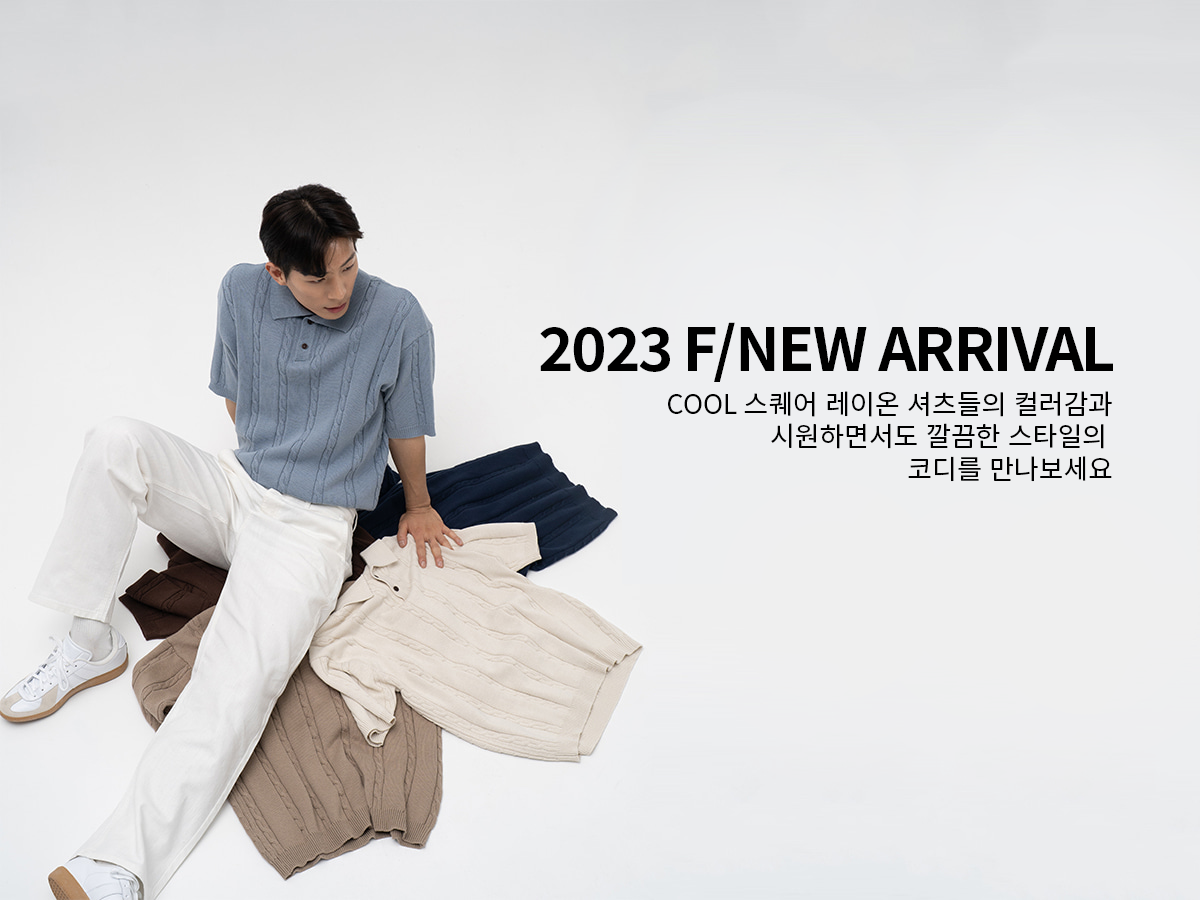
<style>
.page{position:relative;width:1200px;height:900px}
.page>*{position:absolute;margin:0}
.t1{font:60px "NotoSansKR-Bold";letter-spacing:-0.03em;color:#000000}
.t2{font:27px "NotoSansKR-Regular";letter-spacing:-0.002em;color:#000000}
</style>
<div class="page">
<p class="t1" style="left:540px;top:322px;width:573px;height:60px">2023 F/NEW ARRIVAL</p>
<p class="t2" style="left:668px;top:391px;width:444px;height:91px;text-align:right">COOL 스퀘어 레이온 셔츠들의 컬러감과<br>시원하면서도 깔끔한 스타일의 <br>코디를 만나보세요</p>
</div>
